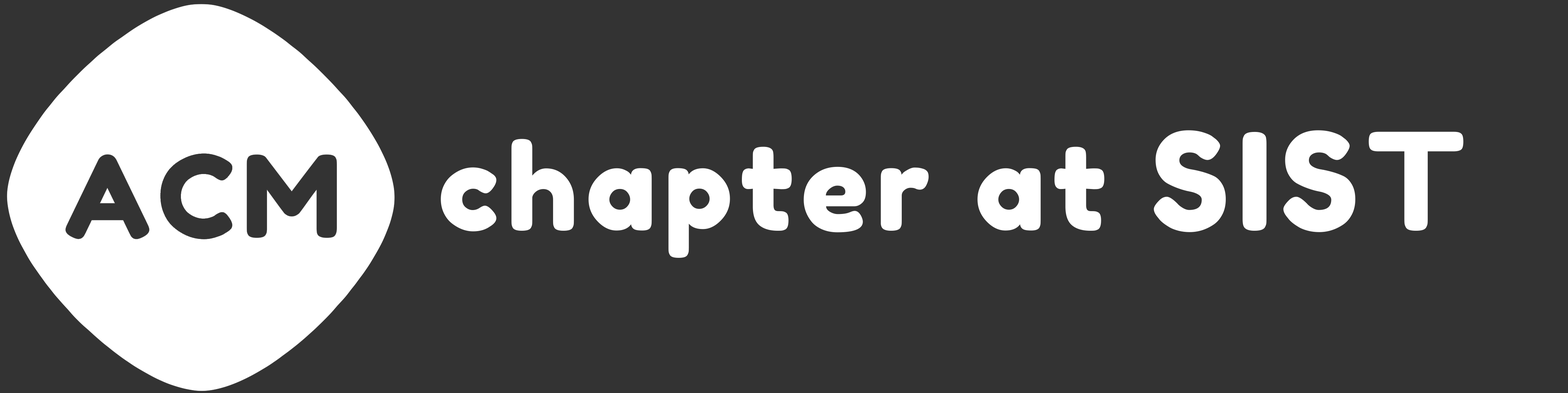
<style>
.page{position:relative;width:1568px;height:393px;background:#333333}
.page>*{position:absolute;margin:0}
.t1{font:119px "FredokaOne-Regular";letter-spacing:0.06em;color:#ffffff}
.t2{font:134.8px "FredokaOne-Regular";letter-spacing:0.06em;color:#ffffff}
</style>
<div class="page">
<p class="t1" style="left:441px;top:130px;width:1022px;height:128px">chapter at <span class="t2">SIST</span></p>
</div>
